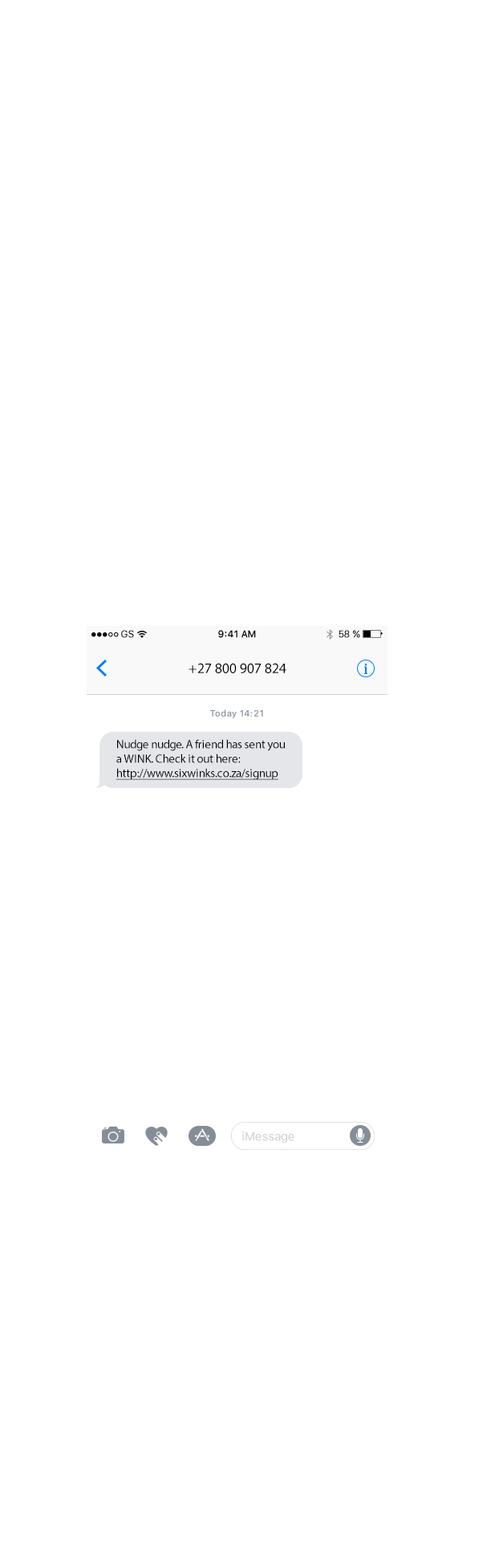
<style>
.page{position:relative;width:499px;height:1568px;background:#ffffff}
.page>*{position:absolute;margin:0}
.t1{font:9.6px "SFUIText-Regular"}
.t2{font:9.6px "SFUIText-Medium";color:#000000}
.t3{font:9.6px "SFUIText-Regular";color:#000000}
.t4{font:14.4px "MyriadPro-Regular";color:#000000}
.t5{font:8.8px "SFUIText-Medium";letter-spacing:0.035em;color:#858e99}
.t6{font:12px/14.4px "MyriadPro-Regular";letter-spacing:-0.016em;color:#000000}
.t7{font:12px/14.4px "MyriadPro-Regular";letter-spacing:-0.016em;color:#000000;text-decoration:underline}
.t8{font:12px "SFUIText-Regular";letter-spacing:-0.016em;color:#cdced2}
</style>
<div class="page">
<p class="t1" style="left:121px;top:630px;width:13px;height:8px">GS</p>
<p class="t2" style="left:218px;top:630px;width:38px;height:8px">9:41 AM</p>
<p class="t3" style="left:339px;top:630px;width:21px;height:8px">58 %</p>
<p class="t4" style="left:189px;top:663px;width:97px;height:10px">+27 800 907 824</p>
<p class="t5" style="left:210px;top:709px;width:53px;height:9px">Today 14:21</p>
<p class="t6" style="left:116px;top:739px;width:169px;height:41px">Nudge nudge. A friend has sent you <br>a WINK. Check it out here:<br><span class="t7">http://www.sixwinks.co.za/signup</span></p>
<p class="t8" style="left:242px;top:1131px;width:53px;height:12px">iMessage</p>
</div>
